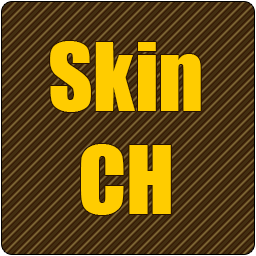
<style>
.page{position:relative;width:256px;height:256px;background:#422e11}
.page>*{position:absolute;margin:0}
.t1{font:86.7px "Impact";color:#ffcc00}
</style>
<div class="page">
<p class="t1" style="left:50px;top:41px;width:151px;height:174px;text-align:center">Skin<br>CH</p>
</div>
